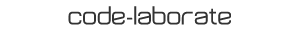
<style>
.page{position:relative;width:300px;height:30px;background:#ffffff}
.page>*{position:absolute;margin:0}
.t1{font:25px "NotJustGroovy";color:#333333}
</style>
<div class="page">
<p class="t1" style="left:68px;top:6px;width:163px;height:19px">code-laborate</p>
</div>
